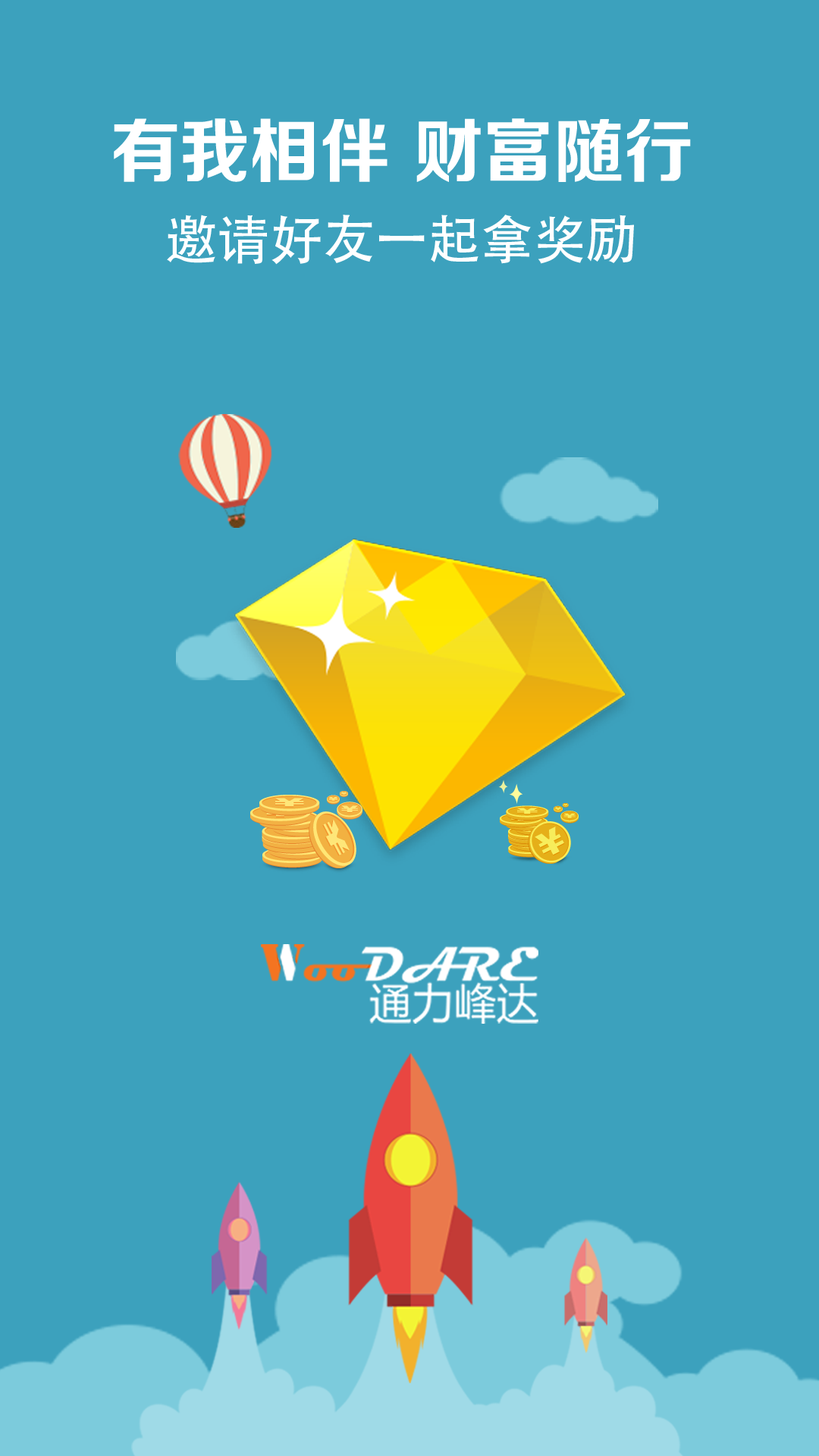
<style>
.page{position:relative;width:819px;height:1456px;background:#3ca1bd}
.page>*{position:absolute;margin:0}
.t1{font:70.1px/98.6px "FZZCHJW--GB1-0";color:#ffffff}
.t2{font:52.6px/98.6px "AdobeHeitiStd-Regular";color:#ffffff}
</style>
<div class="page">
<p class="t1" style="left:114px;top:118px;width:577px;height:147px;text-align:center">有我相伴 财富随行<br><span class="t2">邀请好友一起拿奖励</span></p>
</div>
